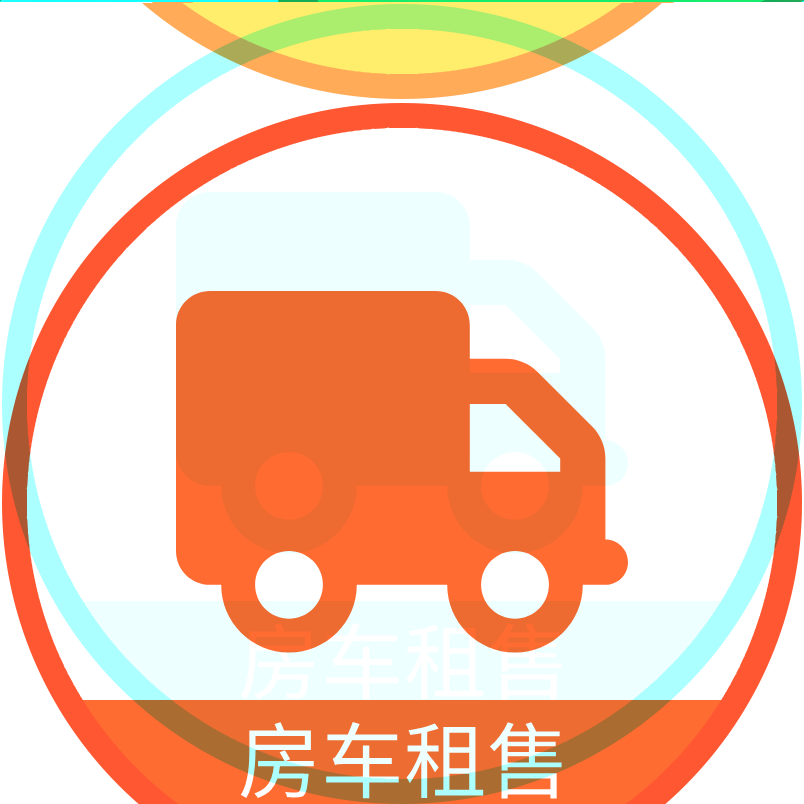
<style>
.page{position:relative;width:804px;height:804px;background:#ffffff}
.page>*{position:absolute;margin:0}
.t1{font:83.1px "MicrosoftYaHei";color:#ffffff}
</style>
<div class="page">
<p class="t1" style="left:240px;top:620px;width:322px;height:78px">房车租售</p>
</div>
